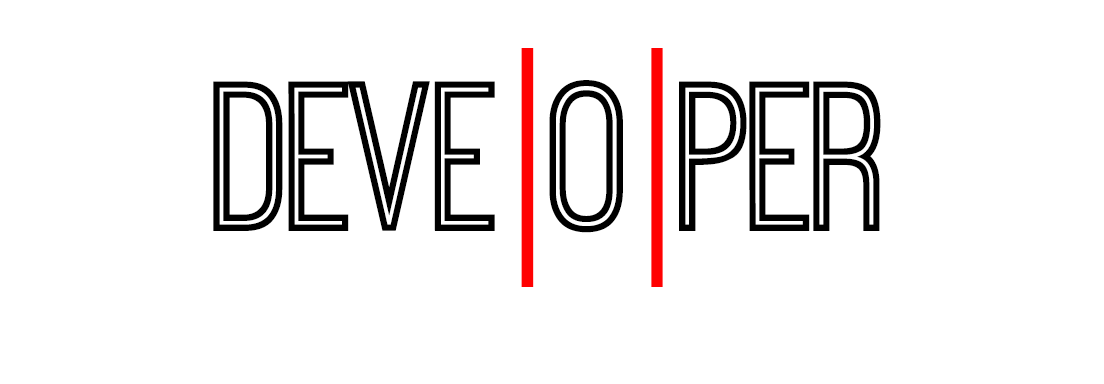
<style>
.page{position:relative;width:1104px;height:384px;background:#ffffff}
.page>*{position:absolute;margin:0}
.t1{font:221.3px "OstrichSansInline";letter-spacing:-0.025em;color:#000000}
.t2{font:221.3px "MicrosoftJhengHeiUILight";letter-spacing:-0.025em;color:#ff0101}
</style>
<div class="page">
<p class="t1" style="left:213px;top:48px;width:668px;height:239px">deve<span class="t2">|</span>o<span class="t2">|</span>per</p>
</div>
